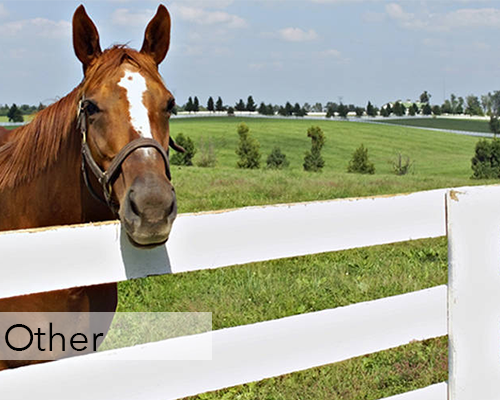
<style>
.page{position:relative;width:500px;height:400px}
.page>*{position:absolute;margin:0}
.t1{font:37.5px "AvenirNext-Regular";color:#000000}
</style>
<div class="page">
<p class="t1" style="left:5px;top:322px;width:99px;height:29px">Other</p>
</div>
